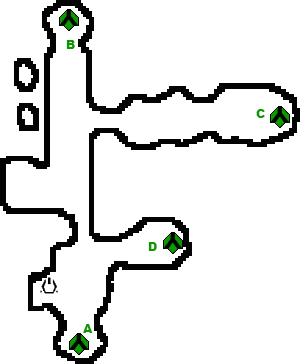
<style>
.page{position:relative;width:300px;height:364px;background:#ffffff}
.page>*{position:absolute;margin:0}
.t1{font:12px "Arial-Black";color:#0c9801}
</style>
<div class="page">
<p class="t1" style="left:66px;top:40px;width:9px;height:9px">B</p>
<p class="t1" style="left:256px;top:109px;width:9px;height:9px">C</p>
<p class="t1" style="left:148px;top:242px;width:9px;height:9px">D</p>
<p class="t1" style="left:83px;top:324px;width:10px;height:9px">A</p>
</div>
